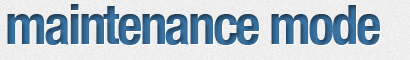
<style>
.page{position:relative;width:410px;height:60px}
.page>*{position:absolute;margin:0}
.t1{font:55px "HelveticaNeue-CondensedBold";letter-spacing:-0.05em;color:#33658f}
</style>
<div class="page">
<p class="t1" style="left:7px;top:4px;width:373px;height:41px">maintenance mode</p>
</div>
